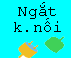
<style>
.page{position:relative;width:71px;height:58px;background:#00ffff}
.page>*{position:absolute;margin:0}
.t1{font:16px/16px "CourierNewPSMT";color:#000000}
</style>
<div class="page">
<p class="t1" style="left:14px;top:2px;width:47px;height:30px;text-align:center">Ngắt<br>k.nối</p>
</div>
